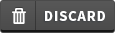
<style>
.page{position:relative;width:115px;height:33px}
.page>*{position:absolute;margin:0}
.t1{font:15px "SourceSansPro-Bold";letter-spacing:0.04em;color:#ffffff}
</style>
<div class="page">
<p class="t1" style="left:45px;top:11px;width:60px;height:10px">DISCARD</p>
</div>
